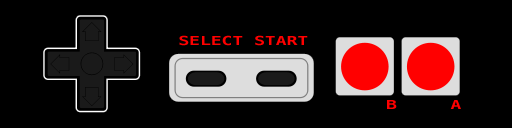
<style>
.page{position:relative;width:512px;height:128px;background:#000000}
.page>*{position:absolute;margin:0}
.t1{font:12.6px "Menlo-Bold";color:#ff0000;scale:1.43 1}
</style>
<div class="page">
<p class="t1" style="left:179px;top:35px;width:129px;height:11px">SELECT START</p>
<p class="t1" style="left:387px;top:100px;width:10px;height:9px">B</p>
<p class="t1" style="left:450px;top:100px;width:11px;height:9px">A</p>
</div>
